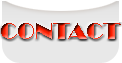
<style>
.page{position:relative;width:122px;height:63px;background:#e8e8e8}
.page>*{position:absolute;margin:0}
.t1{font:24px "Broadway"}
</style>
<div class="page">
<p class="t1" style="left:2px;top:24px;width:119px;height:16px">CONTACT</p>
</div>
